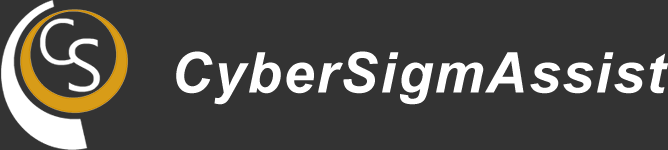
<style>
.page{position:relative;width:668px;height:150px;background:#333333}
.page>*{position:absolute;margin:0}
.t1{font:56px "Arial-BoldItalicMT";letter-spacing:0.04em;color:#ffffff}
</style>
<div class="page">
<p class="t1" style="left:176px;top:51px;width:492px;height:54px">CyberSigmAssist</p>
</div>
